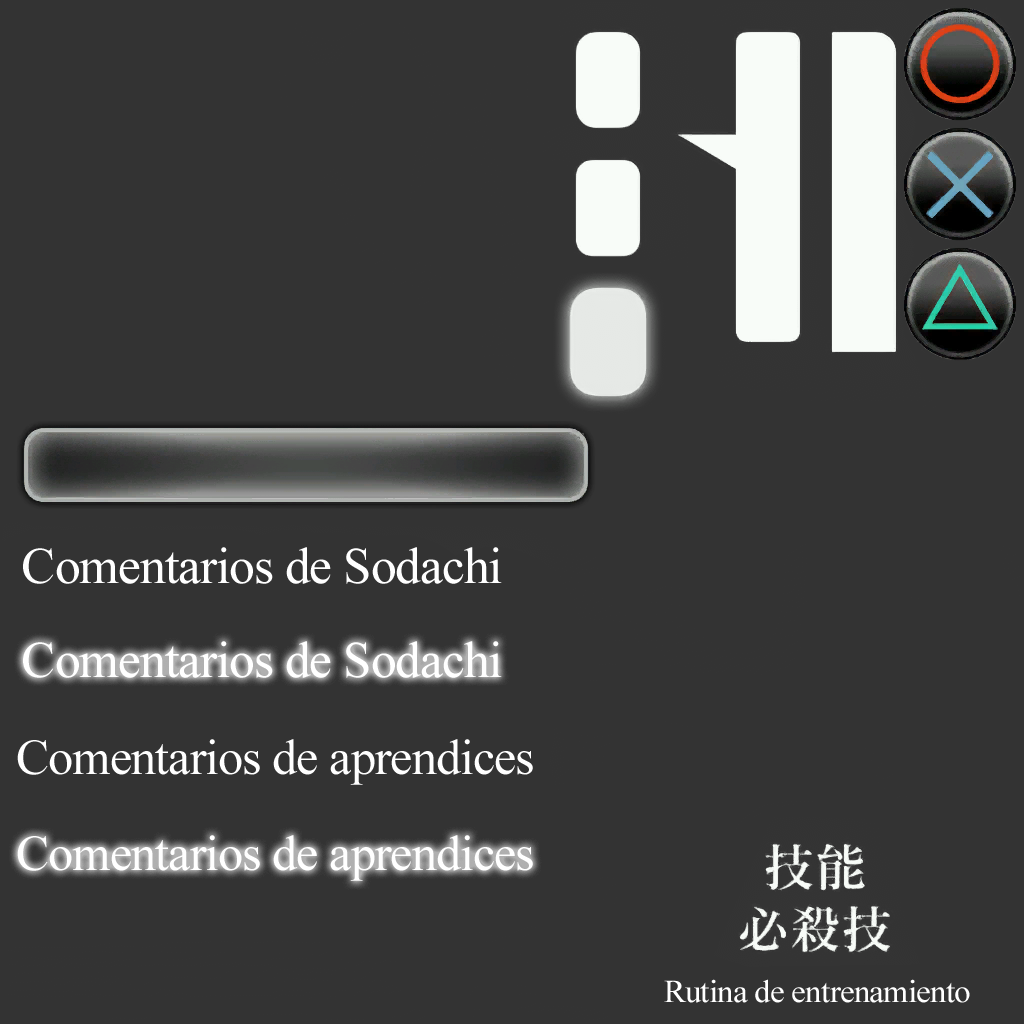
<style>
.page{position:relative;width:1024px;height:1024px;background:#333333}
.page>*{position:absolute;margin:0}
.t1{font:51.3px "TimesNewRomanPSMT";letter-spacing:-0.02em;color:#ffffff}
.t2{font:50px "TimesNewRomanPSMT";letter-spacing:-0.02em;color:#ffffff}
.t3{font:32px "TimesNewRomanPSMT";letter-spacing:-0.02em;color:#ffffff}
</style>
<div class="page">
<p class="t1" style="left:23px;top:547px;width:479px;height:37px">Comentarios de Sodachi</p>
<p class="t1" style="left:23px;top:641px;width:479px;height:37px">Comentarios de Sodachi</p>
<p class="t2" style="left:17px;top:739px;width:516px;height:46px">Comentarios de aprendices</p>
<p class="t2" style="left:17px;top:835px;width:516px;height:46px">Comentarios de aprendices</p>
<p class="t3" style="left:664px;top:979px;width:306px;height:24px">Rutina de entrenamiento</p>
</div>
